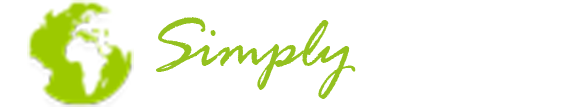
<style>
.page{position:relative;width:588px;height:108px;background:#ffffff}
.page>*{position:absolute;margin:0}
.t1{font:75.6px "RageItalic";color:#94c11f}
.t2{font:75.6px "RageItalic";color:#ffffff}
</style>
<div class="page">
<p class="t1" style="left:156px;top:17px;width:421px;height:82px"><span class="t2">! </span>Simply<span class="t2"> Green</span></p>
</div>
